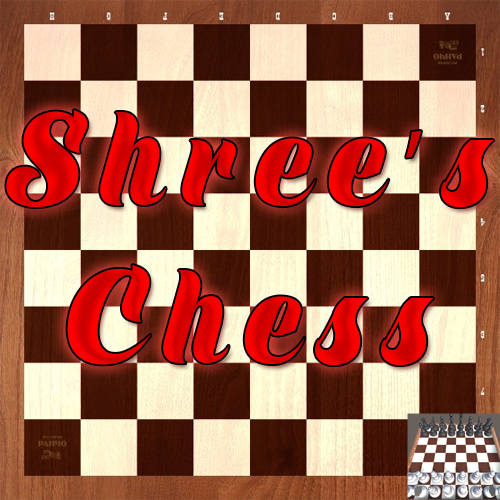
<style>
.page{position:relative;width:500px;height:500px}
.page>*{position:absolute;margin:0}
.t1{font:108.8px/158px "ShinePersonalUse";letter-spacing:0.18em;scale:0.92 1}
.t2{font:108.8px/158px "MyriadPro-Regular";letter-spacing:0.18em;scale:0.92 1}
</style>
<div class="page">
<p class="t1" style="left:6px;top:110px;width:488px;height:256px;text-align:center">Shree<span class="t2">’</span>s<br>Chess</p>
</div>
